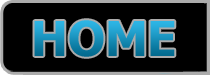
<style>
.page{position:relative;width:210px;height:75px;background:#000000}
.page>*{position:absolute;margin:0}
.t1{font:48px "Tahoma-Bold"}
</style>
<div class="page">
<p class="t1" style="left:34px;top:20px;width:141px;height:37px">HOME</p>
</div>
